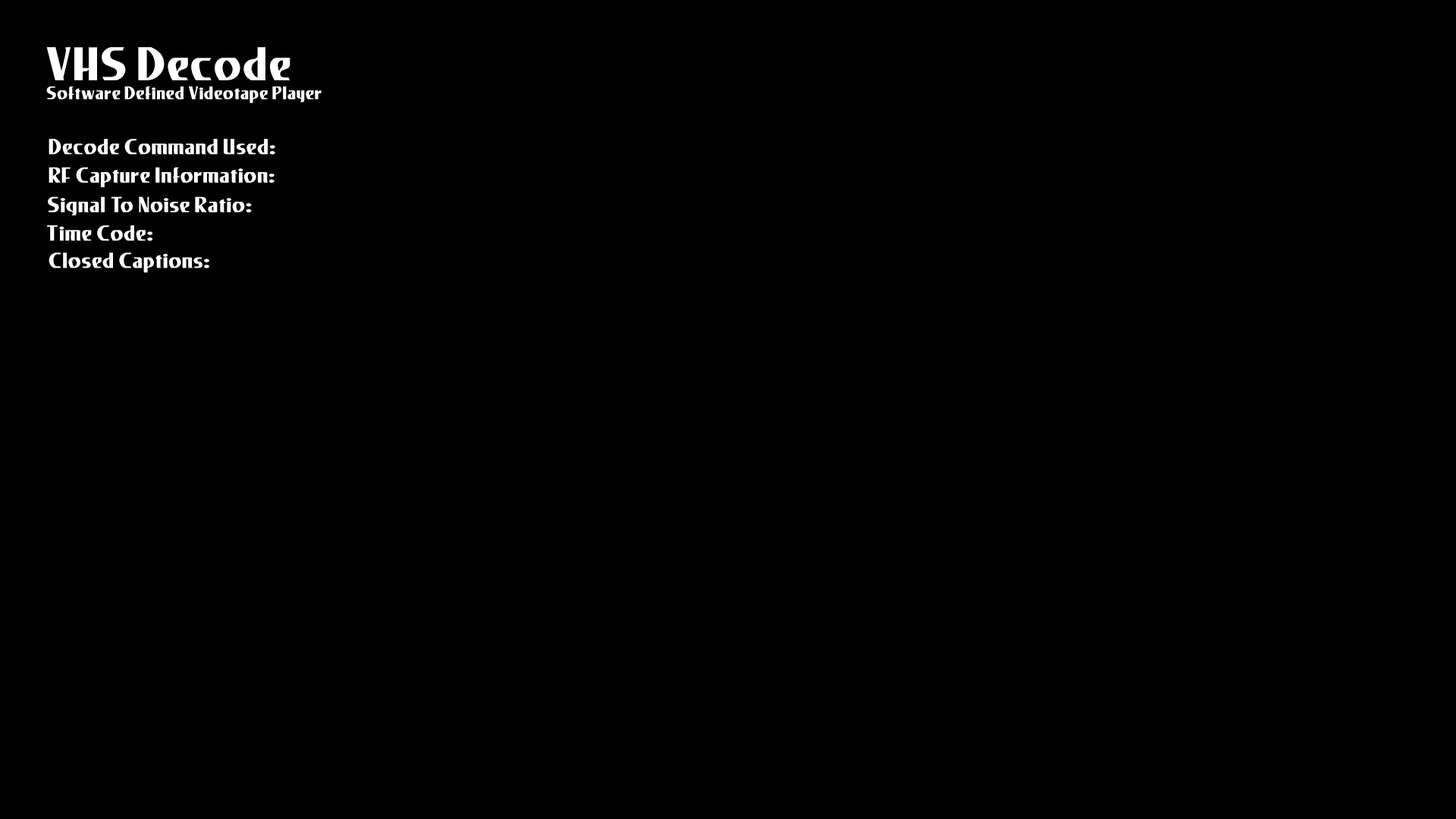
<style>
.page{position:relative;width:1456px;height:819px;background:#000000}
.page>*{position:absolute;margin:0}
.t1{font:19px/19px "LesterBold";color:#ffffff}
.t2{font:49.3px/13.6px "LesterBold";color:#ffffff}
.t3{font:22.7px "LesterBold";color:#ffffff}
</style>
<div class="page">
<p class="t1" style="left:46px;top:47px;width:276px;height:56px"><span class="t2">VHS Decode<br></span>Software Defined Videotape Player</p>
<p class="t3" style="left:49px;top:139px;width:226px;height:16px">Decode Command Used:</p>
<p class="t3" style="left:49px;top:167px;width:226px;height:20px">RF Capture Information:</p>
<p class="t3" style="left:48px;top:196px;width:204px;height:19px">Signal To Noise Ratio:</p>
<p class="t3" style="left:46px;top:225px;width:106px;height:16px">Time Code:</p>
<p class="t3" style="left:49px;top:253px;width:160px;height:20px">Closed Captions:</p>
</div>
